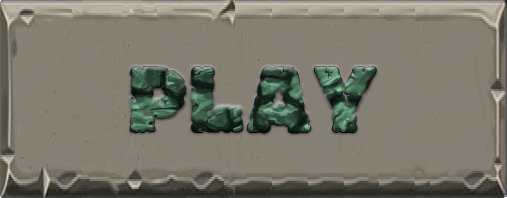
<style>
.page{position:relative;width:507px;height:198px;background:#868074}
.page>*{position:absolute;margin:0}
.t1{font:80px "JFRockSolid"}
</style>
<div class="page">
<p class="t1" style="left:130px;top:67px;width:246px;height:66px">Play</p>
</div>
